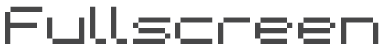
<style>
.page{position:relative;width:388px;height:47px;background:#ffffff}
.page>*{position:absolute;margin:0}
.t1{font:48px "BMspaceA9";color:#474748}
</style>
<div class="page">
<p class="t1" style="left:5px;top:6px;width:374px;height:38px">Fullscreen</p>
</div>
